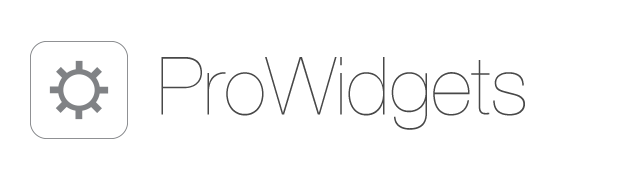
<style>
.page{position:relative;width:640px;height:180px;background:#ffffff}
.page>*{position:absolute;margin:0}
.t1{font:80.5px "HelveticaNeue-UltraLight";color:#484848}
</style>
<div class="page">
<p class="t1" style="left:161px;top:57px;width:364px;height:73px">ProWidgets</p>
</div>
